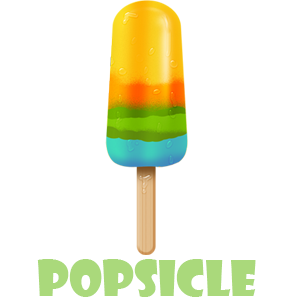
<style>
.page{position:relative;width:300px;height:300px;background:#ffffff}
.page>*{position:absolute;margin:0}
.t1{font:48px "ShowcardGothic-Reg";color:#aad97b}
</style>
<div class="page">
<p class="t1" style="left:37px;top:259px;width:219px;height:38px">POPSICLE</p>
</div>
